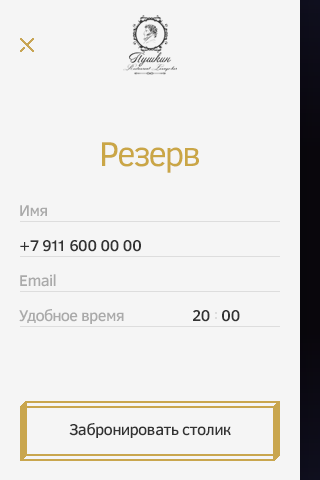
<style>
.page{position:relative;width:320px;height:480px;background:#f5f5f5}
.page>*{position:absolute;margin:0}
.t1{font:35px "ClearSans";letter-spacing:-0.05em;color:#caa646}
.t2{font:35px "ClearSans";letter-spacing:-0.06em;color:#caa646}
.t3{font:35px "ClearSans";letter-spacing:-0.025em;color:#caa646}
.t4{font:35px "ClearSans";letter-spacing:-0.075em;color:#caa646}
.t5{font:16px "ClearSans-Medium";letter-spacing:-0.035em;color:#aaaaaa}
.t6{font:16px "ClearSans-Medium";letter-spacing:-0.05em;color:#aaaaaa}
.t7{font:16px "ClearSans-Medium";color:#aaaaaa}
.t8{font:16px "ClearSans-Medium";letter-spacing:-0.035em;color:#333333}
.t9{font:16px "ClearSans-Medium";letter-spacing:-0.1em;color:#333333}
.t10{font:16px "ClearSans-Medium";letter-spacing:-0.2em;color:#333333}
.t11{font:16px "ClearSans-Medium";letter-spacing:-0.125em;color:#aaaaaa}
.t12{font:16px "ClearSans-Medium";letter-spacing:-0.06em;color:#aaaaaa}
.t13{font:16px "ClearSans-Medium";letter-spacing:-0.02em;color:#aaaaaa}
.t14{font:16px "ClearSans-Medium";letter-spacing:-0.025em;color:#333333}
.t15{font:16px "ClearSans-Medium";color:#333333}
</style>
<div class="page">
<p class="t1" style="left:102px;top:142px;width:97px;height:31px"><span class="t2">Р</span><span class="t3">е</span>зе<span class="t4">р</span><span class="t3">в</span></p>
<p class="t5" style="left:20px;top:205px;width:27px;height:11px">И<span class="t6">м</span><span class="t7">я</span></p>
<p class="t8" style="left:20px;top:240px;width:121px;height:12px">+7 <span class="t9">9</span><span class="t10">1</span>1 600 00 00</p>
<p class="t5" style="left:20px;top:274px;width:36px;height:13px">E<span class="t6">m</span>ail</p>
<p class="t5" style="left:19px;top:309px;width:105px;height:15px"><span class="t11">У</span>добное <span class="t12">в</span><span class="t13">р</span><span class="t6">ем</span>я</p>
<p class="t8" style="left:193px;top:310px;width:17px;height:12px">20</p>
<p class="t8" style="left:222px;top:310px;width:18px;height:12px">00</p>
<p class="t14" style="left:69px;top:423px;width:162px;height:15px">Забронирова<span class="t15">т</span>ь <span class="t15">ст</span>олик</p>
</div>
